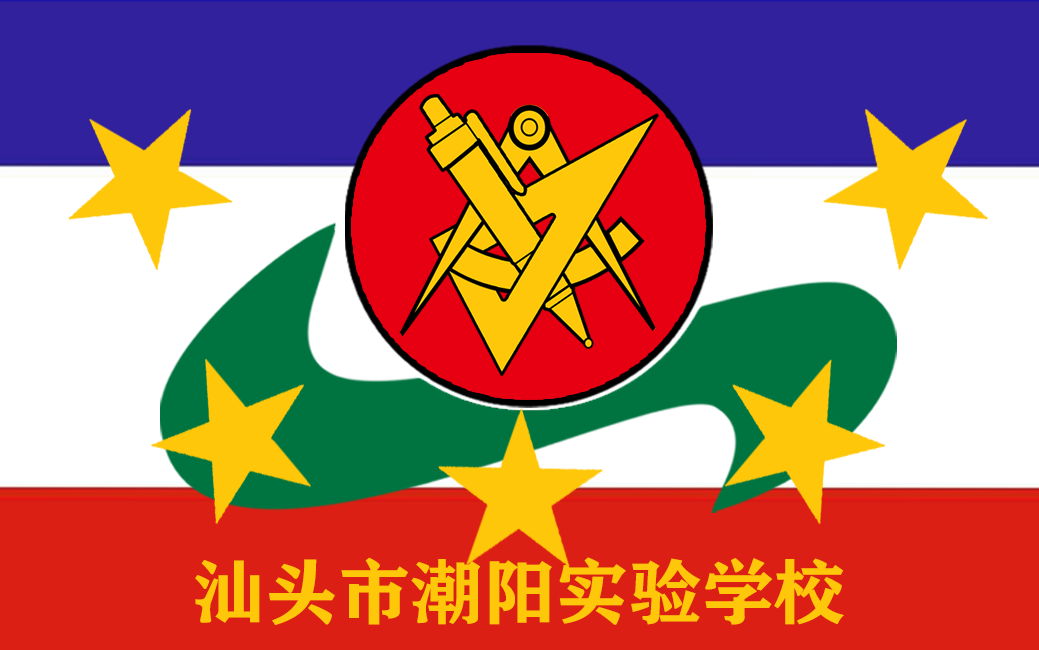
<style>
.page{position:relative;width:1039px;height:650px;background:#ffffff}
.page>*{position:absolute;margin:0}
.t1{font:71.3px "FZCHSJW--GB1-0";color:#ffc709}
</style>
<div class="page">
<p class="t1" style="left:195px;top:557px;width:649px;height:68px">汕头市潮阳实验学校</p>
</div>
